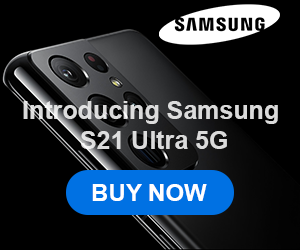
<style>
.page{position:relative;width:300px;height:250px;background:#000000}
.page>*{position:absolute;margin:0}
.t1{font:25px "Arial-BoldMT";color:#dbdbdb}
.t2{font:24px "Arial-BoldMT";color:#ffffff}
</style>
<div class="page">
<p class="t1" style="left:23px;top:101px;width:255px;height:48px;text-align:center">Introducing Samsung<br> S21 Ultra 5G</p>
<p class="t2" style="left:92px;top:184px;width:115px;height:17px">BUY NOW</p>
</div>
